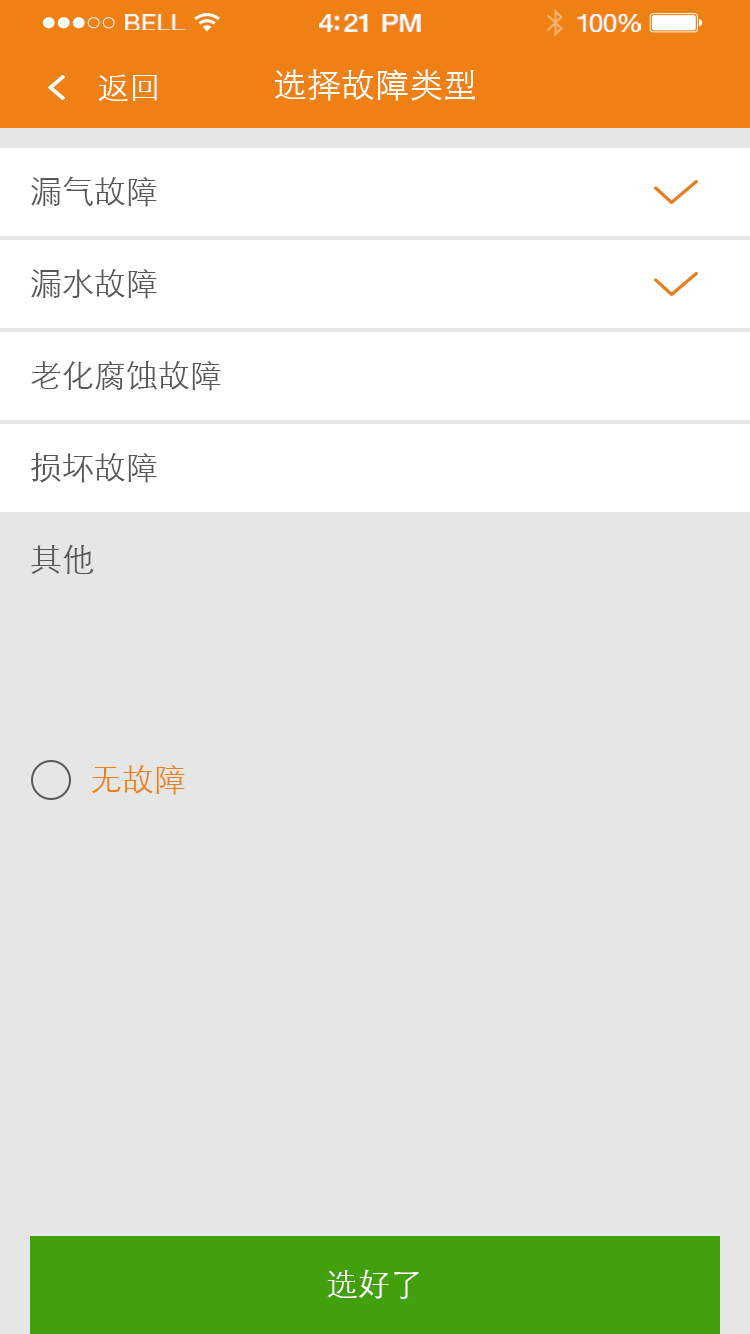
<style>
.page{position:relative;width:750px;height:1334px;background:#e6e6e6}
.page>*{position:absolute;margin:0}
.t1{font:23.3px "HelveticaNeue";letter-spacing:0.02em;color:#ffffff;scale:1.06 1}
.t2{font:25.3px "HelveticaNeue-Medium";letter-spacing:-0.02em;color:#ffffff;scale:1.06 1}
.t3{font:24.3px "HelveticaNeue";letter-spacing:-0.02em;color:#ffffff;scale:1.06 1}
.t4{font:32px "STXihei";color:#ffffff}
.t5{font:34px "STXihei";color:#ffffff}
.t6{font:32px "STXihei";color:#595757}
.t7{font:32px "STXihei";color:#ef8013}
</style>
<div class="page">
<p class="t1" style="left:125px;top:14px;width:61px;height:16px">BELL</p>
<p class="t2" style="left:319px;top:14px;width:102px;height:18px">4:21 PM</p>
<p class="t3" style="left:577px;top:14px;width:64px;height:18px">100%</p>
<p class="t4" style="left:98px;top:74px;width:59px;height:27px">返回</p>
<p class="t5" style="left:274px;top:69px;width:201px;height:32px">选择故障类型</p>
<p class="t6" style="left:31px;top:176px;width:126px;height:31px">漏气故障</p>
<p class="t6" style="left:31px;top:269px;width:126px;height:30px">漏水故障</p>
<p class="t6" style="left:31px;top:361px;width:190px;height:30px">老化腐蚀故障</p>
<p class="t6" style="left:30px;top:453px;width:127px;height:30px">损坏故障</p>
<p class="t6" style="left:31px;top:544px;width:63px;height:30px">其他</p>
<p class="t7" style="left:91px;top:765px;width:94px;height:30px">无故障</p>
<p class="t4" style="left:327px;top:1269px;width:92px;height:30px">选好了</p>
</div>
